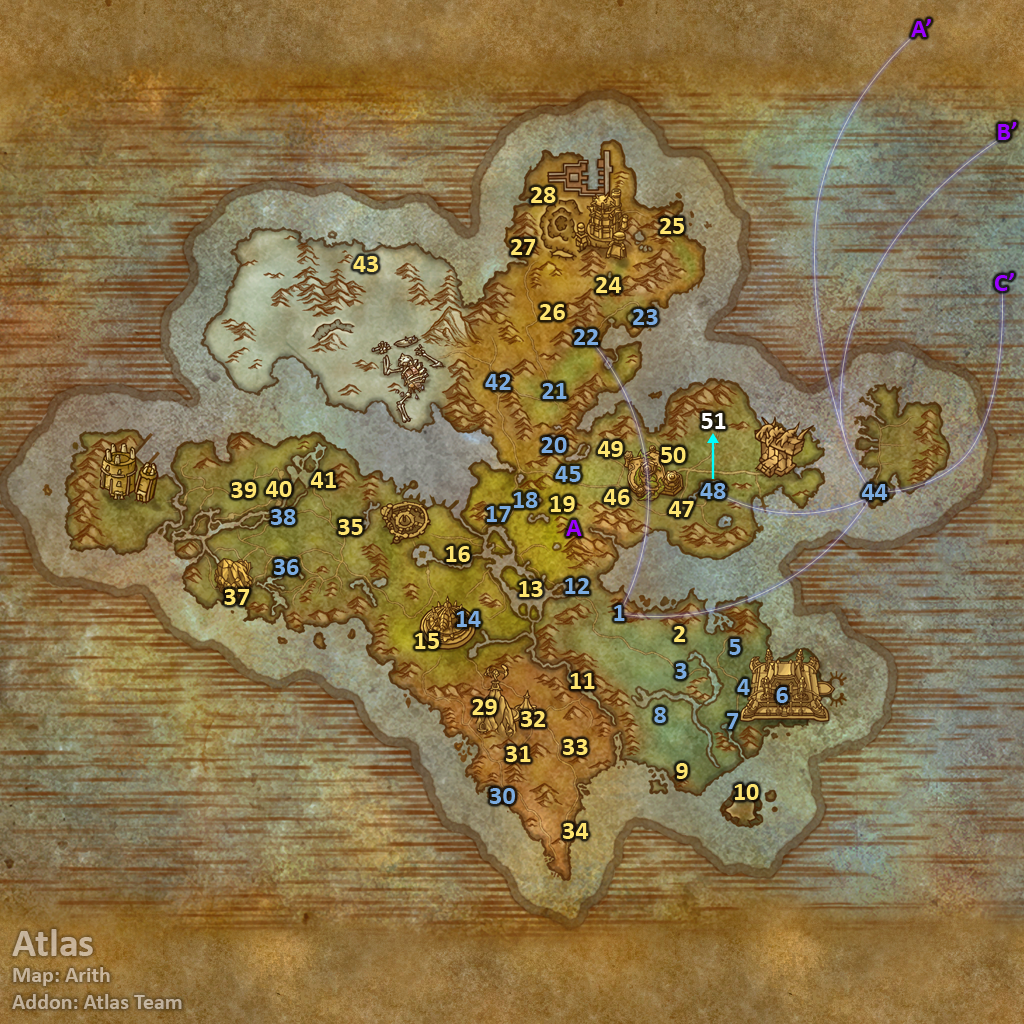
<style>
.page{position:relative;width:1024px;height:1024px}
.page>*{position:absolute;margin:0}
.t1{font:26px "Calibri-Bold";color:#9900ff}
.t2{font:26px "Calibri-Bold";color:#fee570}
.t3{font:26px "Calibri-Bold";color:#7babe0}
.t4{font:26px "Calibri-Bold";color:#ffffff}
.t5{font:22px "Calibri-Bold";color:#c4b39b}
.t6{font:40px "Calibri-Bold";color:#c4b39b}
</style>
<div class="page">
<p class="t1" style="left:911px;top:19px;width:20px;height:18px">A’</p>
<p class="t1" style="left:998px;top:122px;width:19px;height:18px">B’</p>
<p class="t2" style="left:531px;top:187px;width:25px;height:16px">28</p>
<p class="t2" style="left:660px;top:218px;width:24px;height:16px">25</p>
<p class="t2" style="left:511px;top:239px;width:25px;height:16px">27</p>
<p class="t2" style="left:353px;top:256px;width:25px;height:16px">43</p>
<p class="t2" style="left:596px;top:277px;width:26px;height:16px">24</p>
<p class="t1" style="left:995px;top:273px;width:19px;height:18px">C’</p>
<p class="t2" style="left:540px;top:304px;width:25px;height:16px">26</p>
<p class="t3" style="left:633px;top:309px;width:25px;height:16px">23</p>
<p class="t3" style="left:574px;top:329px;width:25px;height:16px">22</p>
<p class="t3" style="left:485px;top:374px;width:26px;height:16px">42</p>
<p class="t3" style="left:542px;top:383px;width:25px;height:16px">21</p>
<p class="t4" style="left:701px;top:413px;width:25px;height:16px">51</p>
<p class="t3" style="left:541px;top:437px;width:26px;height:16px">20</p>
<p class="t2" style="left:597px;top:441px;width:26px;height:16px">49</p>
<p class="t2" style="left:661px;top:447px;width:25px;height:16px">50</p>
<p class="t2" style="left:310px;top:472px;width:26px;height:16px">41</p>
<p class="t3" style="left:555px;top:466px;width:26px;height:16px">45</p>
<p class="t2" style="left:231px;top:482px;width:26px;height:16px">39</p>
<p class="t2" style="left:265px;top:481px;width:27px;height:16px">40</p>
<p class="t3" style="left:700px;top:483px;width:26px;height:16px">48</p>
<p class="t3" style="left:861px;top:484px;width:27px;height:16px">44</p>
<p class="t3" style="left:513px;top:492px;width:25px;height:16px">18</p>
<p class="t2" style="left:550px;top:496px;width:25px;height:16px">19</p>
<p class="t2" style="left:603px;top:489px;width:27px;height:16px">46</p>
<p class="t3" style="left:271px;top:509px;width:25px;height:16px">38</p>
<p class="t3" style="left:486px;top:506px;width:25px;height:16px">17</p>
<p class="t2" style="left:668px;top:501px;width:26px;height:16px">47</p>
<p class="t2" style="left:338px;top:519px;width:25px;height:16px">35</p>
<p class="t1" style="left:566px;top:520px;width:16px;height:16px">A</p>
<p class="t2" style="left:446px;top:546px;width:24px;height:16px">16</p>
<p class="t3" style="left:274px;top:559px;width:25px;height:16px">36</p>
<p class="t2" style="left:519px;top:581px;width:24px;height:16px">13</p>
<p class="t3" style="left:565px;top:578px;width:25px;height:16px">12</p>
<p class="t2" style="left:224px;top:589px;width:26px;height:16px">37</p>
<p class="t3" style="left:614px;top:605px;width:11px;height:16px">1</p>
<p class="t3" style="left:456px;top:611px;width:25px;height:16px">14</p>
<p class="t2" style="left:674px;top:626px;width:12px;height:16px">2</p>
<p class="t2" style="left:415px;top:633px;width:24px;height:16px">15</p>
<p class="t3" style="left:729px;top:639px;width:12px;height:16px">5</p>
<p class="t3" style="left:675px;top:663px;width:12px;height:16px">3</p>
<p class="t2" style="left:570px;top:673px;width:25px;height:16px">11</p>
<p class="t3" style="left:737px;top:679px;width:13px;height:16px">4</p>
<p class="t3" style="left:776px;top:687px;width:12px;height:16px">6</p>
<p class="t2" style="left:472px;top:699px;width:25px;height:16px">29</p>
<p class="t2" style="left:521px;top:711px;width:25px;height:16px">32</p>
<p class="t3" style="left:654px;top:707px;width:12px;height:16px">8</p>
<p class="t3" style="left:727px;top:713px;width:12px;height:16px">7</p>
<p class="t2" style="left:506px;top:746px;width:25px;height:16px">31</p>
<p class="t2" style="left:563px;top:739px;width:25px;height:16px">33</p>
<p class="t2" style="left:676px;top:763px;width:12px;height:16px">9</p>
<p class="t2" style="left:734px;top:784px;width:25px;height:16px">10</p>
<p class="t3" style="left:490px;top:788px;width:25px;height:16px">30</p>
<p class="t2" style="left:563px;top:823px;width:26px;height:16px">34</p>
<p class="t5" style="left:12px;top:929px;width:170px;height:80px"><span class="t6">Atlas<br></span>Map: Arith<br>Addon: Atlas Team</p>
</div>
